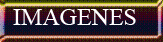
<style>
.page{position:relative;width:163px;height:42px;background:#34060f}
.page>*{position:absolute;margin:0}
.t1{font:24px "TimesNewRomanPSMT";color:#ffffff}
</style>
<div class="page">
<p class="t1" style="left:13px;top:5px;width:124px;height:27px">IMAGENES</p>
</div>
